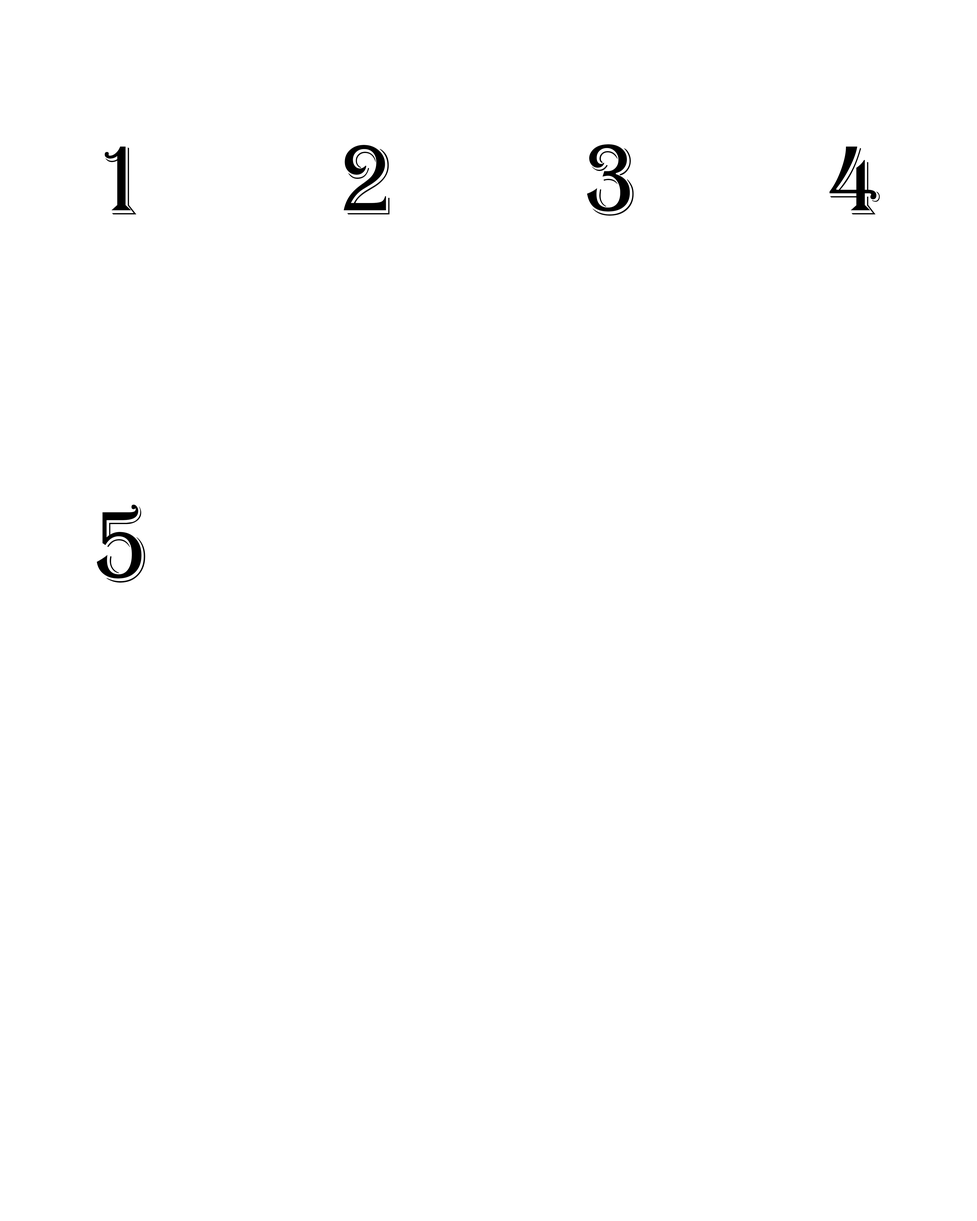
<style>
.page{position:relative;width:977px;height:1221px;background:#ffffff}
.page>*{position:absolute;margin:0}
.t1{font:103.4px "Algerian";color:#000000;scale:0.9 1}
</style>
<div class="page">
<p class="t1" style="left:105px;top:146px;width:31px;height:68px">1</p>
<p class="t1" style="left:343px;top:145px;width:46px;height:69px">2</p>
<p class="t1" style="left:587px;top:144px;width:46px;height:72px">3</p>
<p class="t1" style="left:829px;top:146px;width:50px;height:68px">4</p>
<p class="t1" style="left:97px;top:504px;width:48px;height:79px">5</p>
</div>
